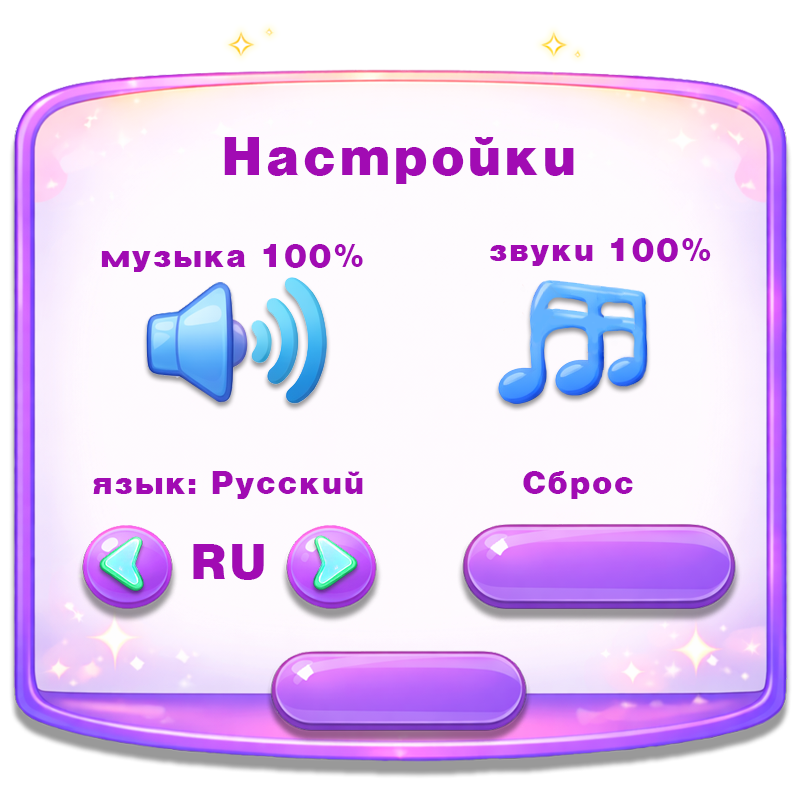
<style>
.page{position:relative;width:800px;height:800px}
.page>*{position:absolute;margin:0}
.t1{font:52.7px "VantaFatPlain";letter-spacing:0.04em;color:#a10bb3}
.t2{font:31.6px "VantaFatPlain";letter-spacing:0.04em;color:#a10bb3}
.t3{font:48px "VantaFatPlain";letter-spacing:0.04em;color:#a10bb3}
</style>
<div class="page">
<p class="t1" style="left:224px;top:137px;width:350px;height:47px">Настройки</p>
<p class="t2" style="left:101px;top:244px;width:262px;height:28px">музыка 100%</p>
<p class="t2" style="left:490px;top:238px;width:221px;height:28px">звуки 100%</p>
<p class="t2" style="left:93px;top:471px;width:270px;height:28px">язык: Русский</p>
<p class="t2" style="left:523px;top:471px;width:110px;height:28px">Сброс</p>
<p class="t3" style="left:193px;top:544px;width:71px;height:36px">RU</p>
</div>
